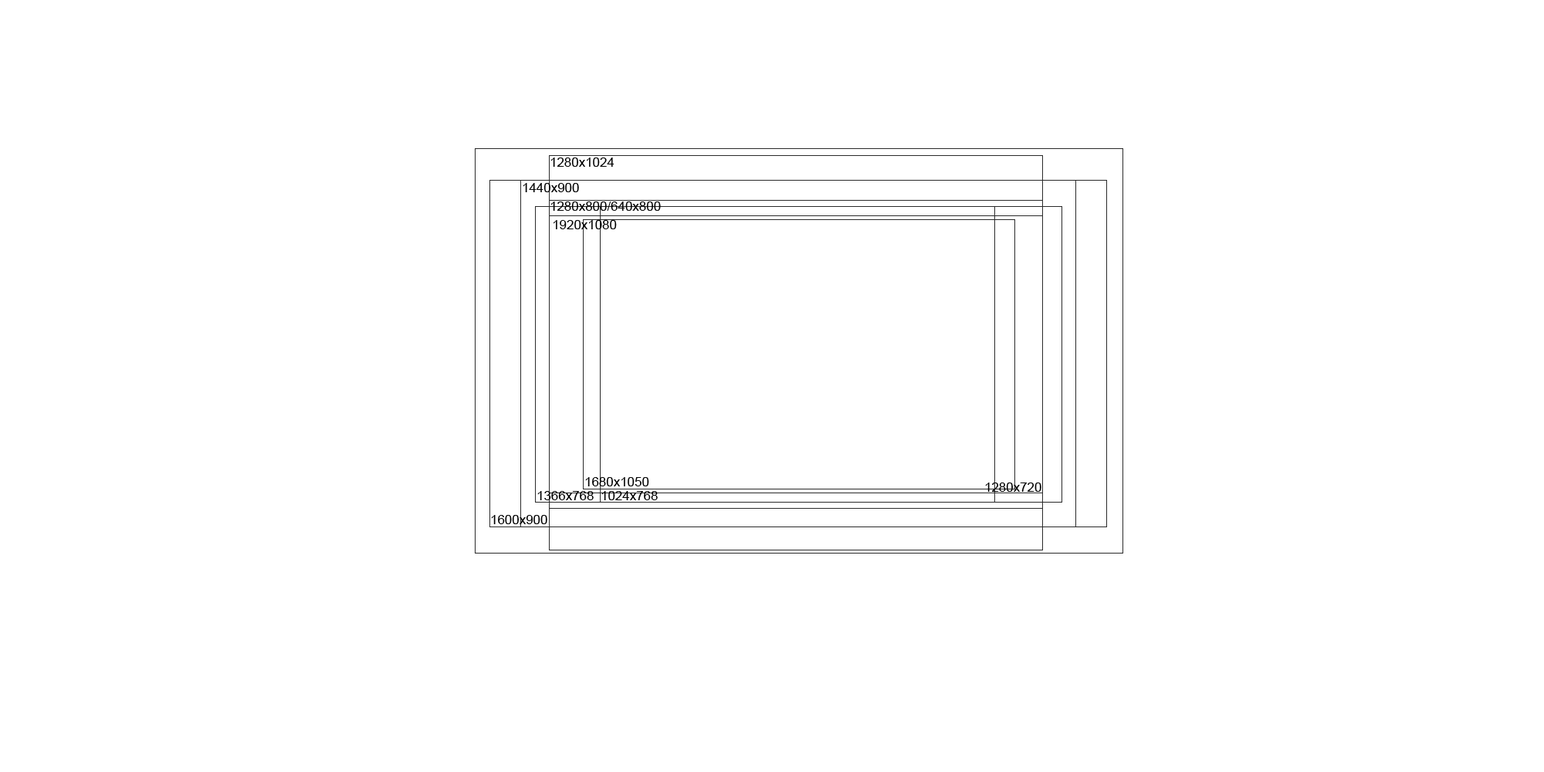
<style>
.page{position:relative;width:1544px;height:772px;background:#ffffff}
.page>*{position:absolute;margin:0}
.t1{font:13.1px "ArialMT";color:#000000}
</style>
<div class="page">
<p class="t1" style="left:551px;top:158px;width:64px;height:9px">1280x1024</p>
<p class="t1" style="left:523px;top:183px;width:56px;height:9px">1440x900</p>
<p class="t1" style="left:551px;top:202px;width:110px;height:9px">1280x800/640x800</p>
<p class="t1" style="left:554px;top:220px;width:63px;height:9px">1920x1080</p>
<p class="t1" style="left:585px;top:477px;width:64px;height:9px">1680x1050</p>
<p class="t1" style="left:985px;top:483px;width:57px;height:9px">1280x720</p>
<p class="t1" style="left:537px;top:491px;width:57px;height:9px">1366x768</p>
<p class="t1" style="left:602px;top:491px;width:56px;height:9px">1024x768</p>
<p class="t1" style="left:491px;top:515px;width:56px;height:9px">1600x900</p>
</div>
